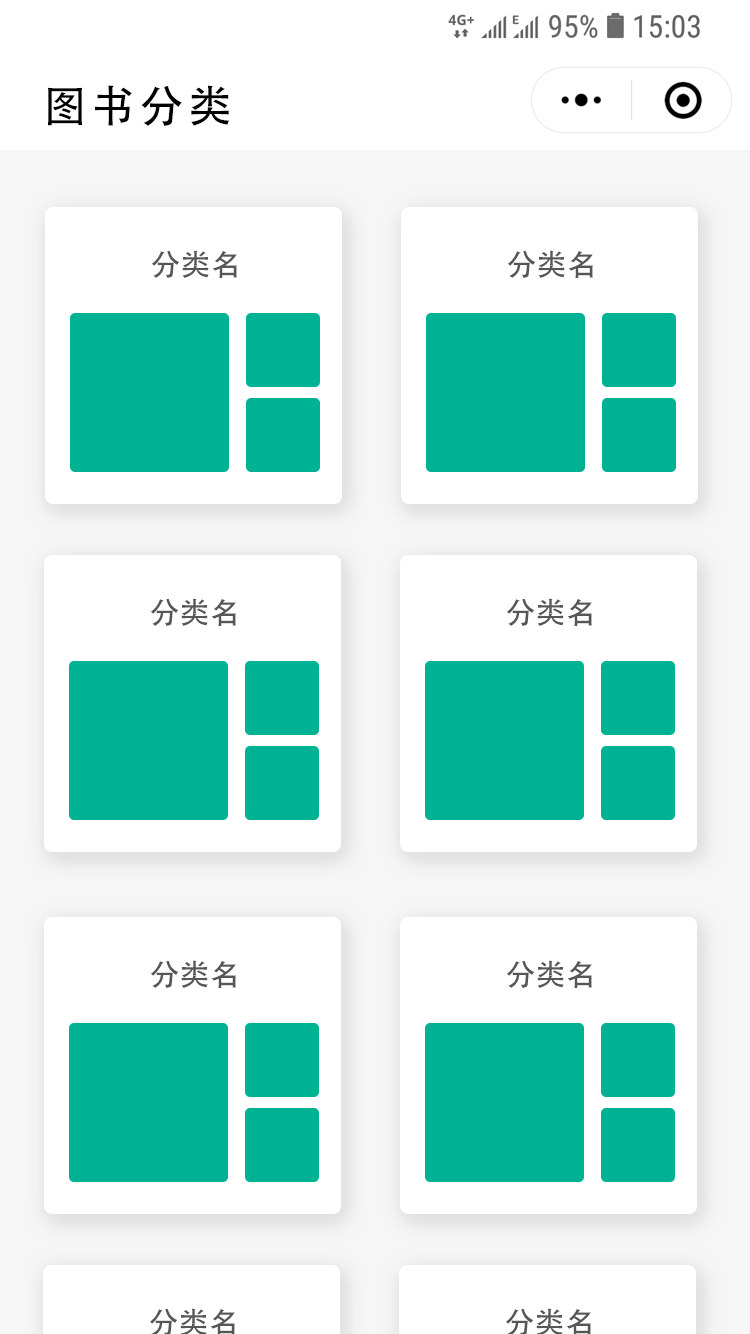
<style>
.page{position:relative;width:750px;height:1334px;background:#ffffff}
.page>*{position:absolute;margin:0}
.t1{font:44px "AdobeHeitiStd-Regular";letter-spacing:0.1em;color:#000000}
.t2{font:30px "AdobeHeitiStd-Regular";color:#565656}
</style>
<div class="page">
<p class="t1" style="left:48px;top:85px;width:182px;height:41px">图书分类</p>
<p class="t2" style="left:151px;top:250px;width:86px;height:28px">分类名</p>
<p class="t2" style="left:507px;top:250px;width:86px;height:28px">分类名</p>
<p class="t2" style="left:150px;top:598px;width:86px;height:28px">分类名</p>
<p class="t2" style="left:506px;top:598px;width:86px;height:28px">分类名</p>
<p class="t2" style="left:150px;top:960px;width:86px;height:28px">分类名</p>
<p class="t2" style="left:506px;top:960px;width:86px;height:28px">分类名</p>
<p class="t2" style="left:149px;top:1308px;width:86px;height:28px">分类名</p>
<p class="t2" style="left:505px;top:1308px;width:86px;height:28px">分类名</p>
</div>
